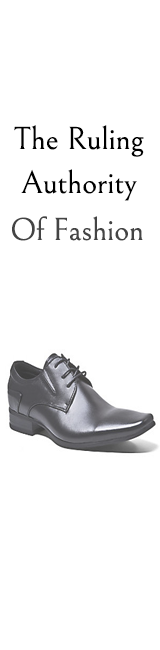
<style>
.page{position:relative;width:160px;height:650px;background:#ffffff}
.page>*{position:absolute;margin:0}
.t1{font:32px "Bellefair-Regular";color:#000000}
.t2{font:32px "Bellefair-Regular";color:#444444}
</style>
<div class="page">
<p class="t1" style="left:14px;top:125px;width:130px;height:32px">The Ruling</p>
<p class="t1" style="left:21px;top:169px;width:116px;height:32px">Authority</p>
<p class="t2" style="left:12px;top:216px;width:131px;height:25px">Of Fashion</p>
</div>
